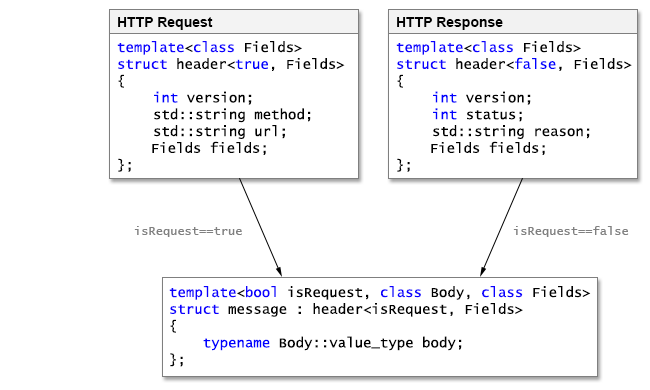
<style>
.page{position:relative;width:650px;height:390px;background:#ffffff}
.page>*{position:absolute;margin:0}
.t1{font:14px "Arial-BoldMT";color:#010101}
.t2{font:14px "LucidaConsole";color:#000000}
.t3{font:14px "LucidaConsole";color:#0c00ff}
.t4{font:14px "LucidaConsole";color:#0000ff}
.t5{font:14px "LucidaConsole";color:#808080}
.t6{font:12px "LucidaConsole";color:#808080}
</style>
<div class="page">
<p class="t1" style="left:118px;top:17px;width:95px;height:13px">HTTP Request</p>
<p class="t1" style="left:397px;top:17px;width:106px;height:13px">HTTP Response</p>
<p class="t2" style="left:117px;top:41px;width:228px;height:131px"><span class="t3">template</span>&lt;<span class="t3">class </span>Fields&gt;<br><span class="t3">struct </span>header&lt;<span class="t4">true</span>, Fields&gt;<br>{<br> <span class="t4">int</span> version;<br> std::string method;<br> std::string url;<br>    Fields fields;<br>};</p>
<p class="t2" style="left:396px;top:41px;width:236px;height:131px"><span class="t3">template</span>&lt;<span class="t3">class </span>Fields&gt;<br><span class="t3">struct </span>header&lt;<span class="t4">false</span>, Fields&gt;<br>{<br> <span class="t4">int</span> version;<br> <span class="t4">int</span> status;<br> std::string reason;<span class="t5"><br></span>    Fields fields;<br>};</p>
<p class="t6" style="left:134px;top:226px;width:108px;height:11px">isRequest==true</p>
<p class="t6" style="left:513px;top:226px;width:116px;height:11px">isRequest==false</p>
<p class="t2" style="left:169px;top:286px;width:422px;height:81px"><span class="t3">template</span>&lt;<span class="t3">bool</span> isRequest, <span class="t3">class</span> Body, <span class="t3">class</span> Fields&gt;<br><span class="t3">struct </span>message : header&lt;isRequest, Fields&gt;<br>{<br>    <span class="t4">typename</span> Body::value_type body;<br>};</p>
</div>
